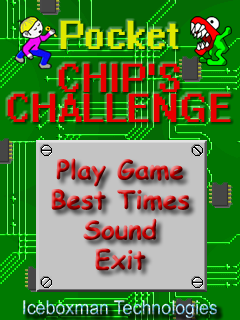
<style>
.page{position:relative;width:240px;height:320px}
.page>*{position:absolute;margin:0}
.t1{font:36px "System";color:#e0e800}
.t2{font:36px/30px "System";color:#e80000}
.t3{font:26px/30px "ComicSansMS-Bold"}
</style>
<div class="page">
<p class="t1" style="left:60px;top:20px;width:119px;height:29px">Pocket</p>
<p class="t2" style="left:7px;top:63px;width:224px;height:59px;text-align:center">CHIP’S<br>CHALLENGE</p>
<p class="t3" style="left:51px;top:158px;width:138px;height:113px;text-align:center">Play Game<br>Best Times<br>Sound<br>Exit</p>
</div>
